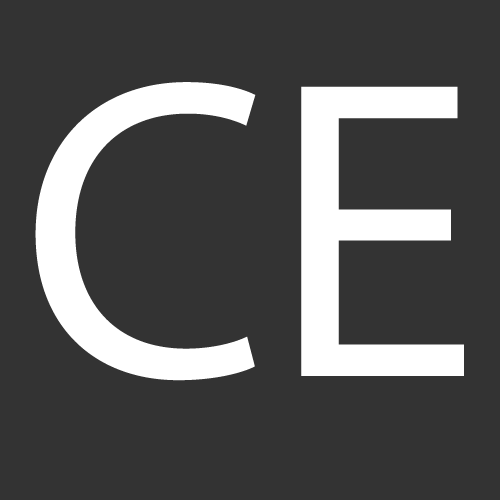
<style>
.page{position:relative;width:500px;height:500px;background:#333333}
.page>*{position:absolute;margin:0}
.t1{font:428.6px "MyriadPro-Regular";color:#ffffff}
</style>
<div class="page">
<p class="t1" style="left:35px;top:82px;width:429px;height:299px">CE</p>
</div>
